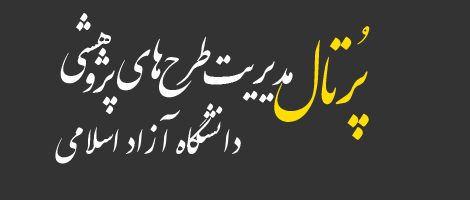
<style>
.page{position:relative;width:470px;height:200px;background:#333333}
.page>*{position:absolute;margin:0}
.t1{font:48px "IranNastaliq";color:#ffffff}
.t2{font:70px "IranNastaliq";color:#fedd00}
.t3{font:48px "IranNastaliq";color:#000000}
.t4{font:40px "IranNastaliq";color:#ffffff}
</style>
<div class="page">
<p class="t1" style="left:60px;top:13px;width:51px;height:71px">هشي</p>
<p class="t2" style="left:274px;top:26px;width:96px;height:114px">پُرتـال</p>
<p class="t1" style="left:117px;top:38px;width:46px;height:53px">هاي</p>
<p class="t1" style="left:159px;top:36px;width:52px;height:62px">طرح</p>
<p class="t1" style="left:82px;top:47px;width:36px;height:67px"><span class="t3"> </span>پژو</p>
<p class="t1" style="left:203px;top:54px;width:90px;height:49px">مديريت</p>
<p class="t4" style="left:55px;top:103px;width:186px;height:61px">دانشگاه آزاد اسلامي</p>
</div>
